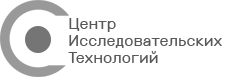
<style>
.page{position:relative;width:228px;height:77px;background:#ffffff}
.page>*{position:absolute;margin:0}
.t1{font:16px/17px "Rubik-Regular";color:#595858}
</style>
<div class="page">
<p class="t1" style="left:68px;top:18px;width:154px;height:45px">Центр<br>Исследовательских<br>Технологий</p>
</div>
